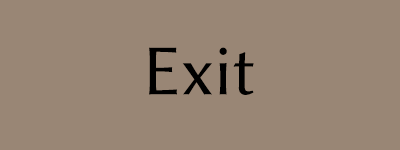
<style>
.page{position:relative;width:400px;height:150px;background:#998675}
.page>*{position:absolute;margin:0}
.t1{font:72px "LinBiolinum";color:#000000}
</style>
<div class="page">
<p class="t1" style="left:149px;top:47px;width:105px;height:48px">Exit</p>
</div>
